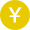
<style>
.page{position:relative;width:30px;height:30px;background:#e8ca00}
.page>*{position:absolute;margin:0}
.t1{font:20px "AdobeHeitiStd-Regular";color:#ffffff}
</style>
<div class="page">
<p class="t1" style="left:8px;top:7px;width:14px;height:16px">￥</p>
</div>
